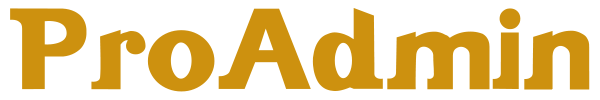
<style>
.page{position:relative;width:600px;height:100px;background:#ffffff}
.page>*{position:absolute;margin:0}
.t1{font:120px "Vintage";color:#cd910f}
</style>
<div class="page">
<p class="t1" style="left:10px;top:8px;width:580px;height:84px">ProAdmin</p>
</div>
